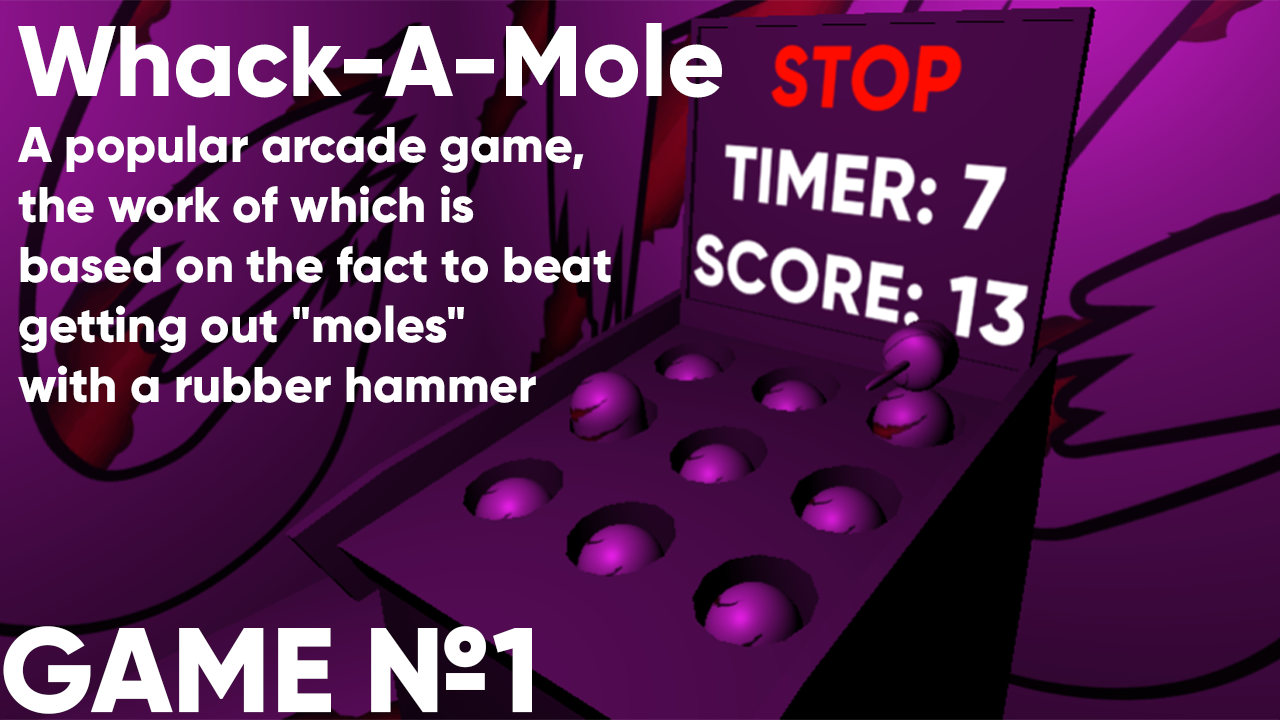
<style>
.page{position:relative;width:1280px;height:720px}
.page>*{position:absolute;margin:0}
.t1{font:100px "Gilroy-ExtraBold";color:#ffffff}
.t2{font:50px "Gilroy-ExtraBold";color:#ffffff}
.t3{font:120px "Gilroy-ExtraBold";color:#ffffff}
</style>
<div class="page">
<p class="t1" style="left:18px;top:23px;width:704px;height:75px">Whack-A-Mole</p>
<p class="t2" style="left:18px;top:125px;width:593px;height:278px">A popular arcade game,<br>the work of which is<br>based on the fact to beat<br>getting out "moles"<br>with a rubber hammer</p>
<p class="t3" style="left:3px;top:626px;width:529px;height:88px">GAME №1</p>
</div>
